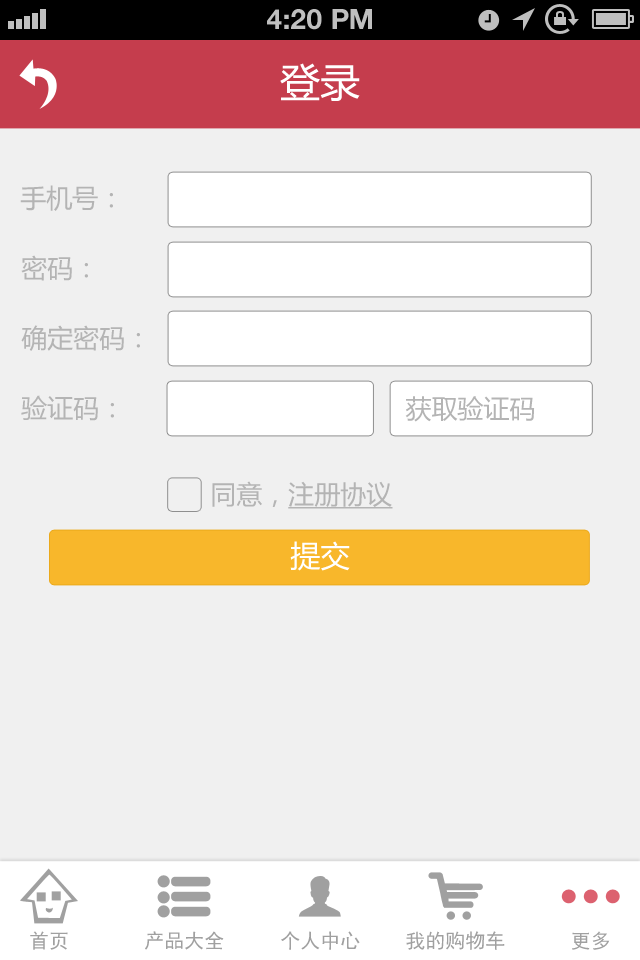
<style>
.page{position:relative;width:640px;height:960px;background:#f0f0f0}
.page>*{position:absolute;margin:0}
.t1{font:28px "HelveticaNeue-Bold";color:#bfbfbf;text-transform:uppercase}
.t2{font:40px "MicrosoftYaHei";color:#ffffff;text-transform:uppercase}
.t3{font:26px "MicrosoftYaHei";color:#b4b4b4;text-transform:uppercase}
.t4{font:26px "MicrosoftYaHei";color:#b4b4b4;text-transform:uppercase;text-decoration:underline}
.t5{font:30px "MicrosoftYaHei";color:#ffffff;text-transform:uppercase}
</style>
<div class="page">
<p class="t1" style="left:267px;top:9px;width:105px;height:21px">4:20 PM</p>
<p class="t2" style="left:280px;top:63px;width:80px;height:38px">登录</p>
<p class="t3" style="left:20px;top:185px;width:93px;height:26px">手机号：</p>
<p class="t3" style="left:21px;top:255px;width:67px;height:26px">密码：</p>
<p class="t3" style="left:21px;top:325px;width:119px;height:26px">确定密码：</p>
<p class="t3" style="left:21px;top:395px;width:93px;height:26px">验证码：</p>
<p class="t3" style="left:405px;top:396px;width:130px;height:26px">获取验证码</p>
<p class="t4" style="left:212px;top:481px;width:181px;height:28px"><span class="t3">同意，</span>注册协议</p>
<p class="t5" style="left:290px;top:541px;width:60px;height:30px">提交</p>
</div>
